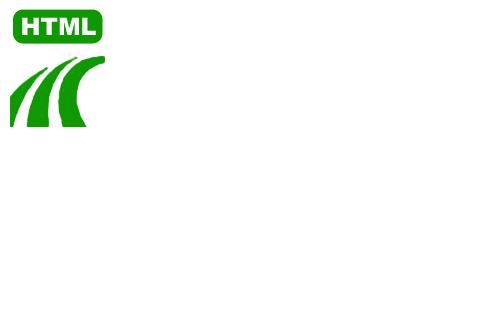
<style>
.page{position:relative;width:503px;height:314px;background:#ffffff}
.page>*{position:absolute;margin:0}
.t1{font:24px "Arial-Black";color:#ffffff}
</style>
<div class="page">
<p class="t1" style="left:22px;top:17px;width:74px;height:18px">HTML</p>
</div>
